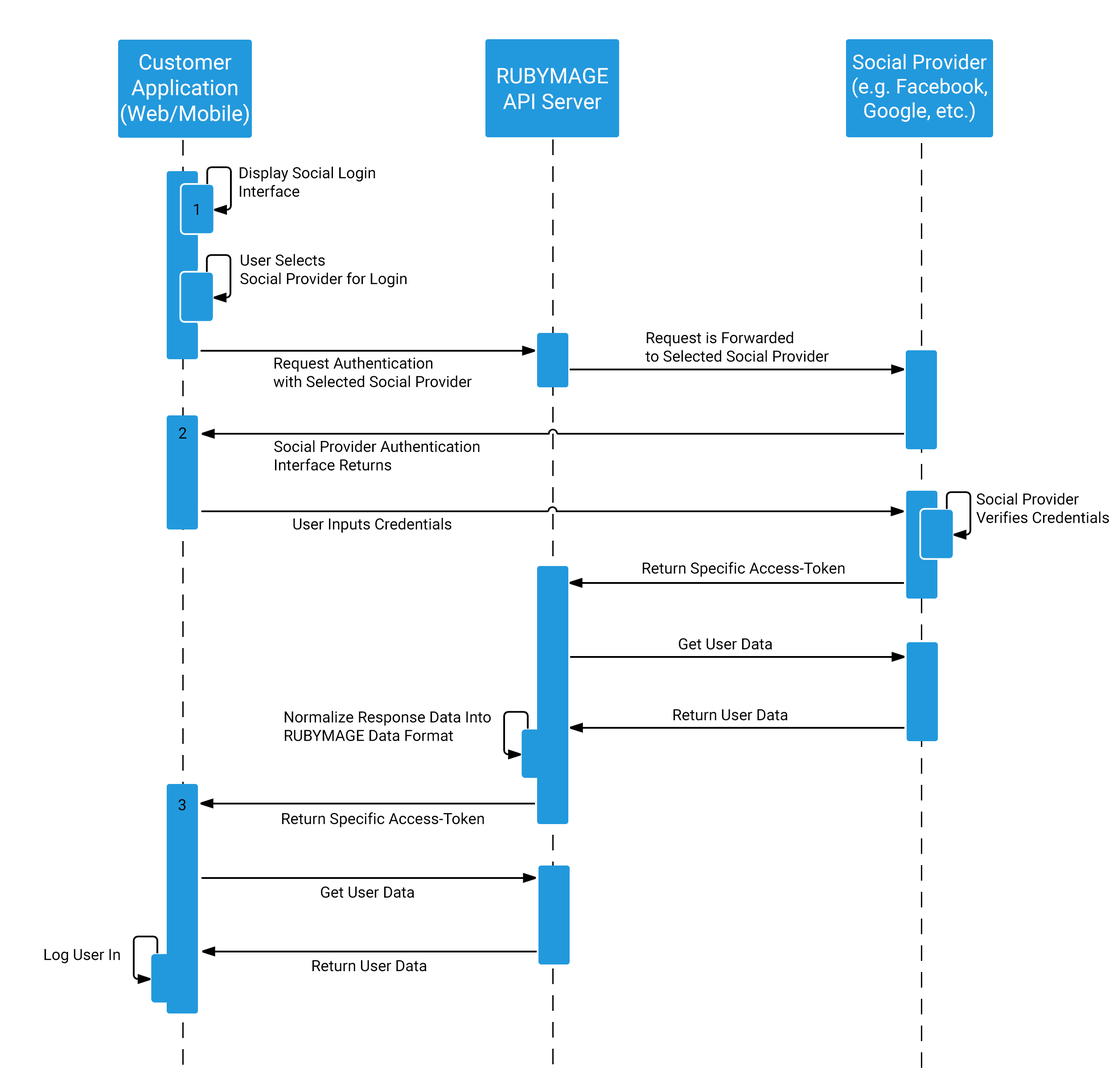
<style>
.page{position:relative;width:1109px;height:1075px;background:#ffffff}
.page>*{position:absolute;margin:0}
.t1{font:21.4px "Roboto-Regular";color:#fefefe}
.t2{font:20.2px "Roboto-Regular";color:#fefefe}
.t3{font:15.5px "Roboto-Regular";color:#000000}
</style>
<div class="page">
<p class="t1" style="left:121px;top:54px;width:128px;height:72px;text-align:center">Customer<br>Application<br>(Web/Mobile)</p>
<p class="t2" style="left:852px;top:54px;width:135px;height:69px;text-align:center">Social Provider<br>(e.g. Facebook,<br>Google, etc.)</p>
<p class="t1" style="left:497px;top:68px;width:111px;height:41px;text-align:center">RUBYMAGE<br>API Server</p>
<p class="t3" style="left:239px;top:167px;width:136px;height:30px">Display Social Login<br>Interface</p>
<p class="t3" style="left:194px;top:204px;width:4px;height:11px">1</p>
<p class="t3" style="left:240px;top:254px;width:167px;height:34px">User Selects <br>Social Provider for Login</p>
<p class="t3" style="left:645px;top:332px;width:184px;height:30px">Request is Forwarded<br>to Selected Social Provider</p>
<p class="t3" style="left:273px;top:357px;width:199px;height:30px">Request Authentication<br>with Selected Social Provider</p>
<p class="t3" style="left:179px;top:427px;width:8px;height:12px">2</p>
<p class="t3" style="left:274px;top:440px;width:206px;height:31px">Social Provider Authentication<br>Interface Returns</p>
<p class="t3" style="left:976px;top:493px;width:133px;height:30px">Social Provider<br>Verifies Credentials</p>
<p class="t3" style="left:293px;top:518px;width:159px;height:15px">User Inputs Credentials</p>
<p class="t3" style="left:643px;top:562px;width:202px;height:15px">Return Specific Access-Token</p>
<p class="t3" style="left:679px;top:638px;width:93px;height:12px">Get User Data</p>
<p class="t3" style="left:284px;top:711px;width:207px;height:30px">Normalize Response Data Into<br>RUBYMAGE Data Format</p>
<p class="t3" style="left:674px;top:709px;width:114px;height:12px">Return User Data</p>
<p class="t3" style="left:178px;top:799px;width:8px;height:12px">3</p>
<p class="t3" style="left:282px;top:812px;width:202px;height:15px">Return Specific Access-Token</p>
<p class="t3" style="left:321px;top:887px;width:93px;height:11px">Get User Data</p>
<p class="t3" style="left:44px;top:949px;width:76px;height:15px">Log User In</p>
<p class="t3" style="left:312px;top:960px;width:115px;height:12px">Return User Data</p>
</div>
